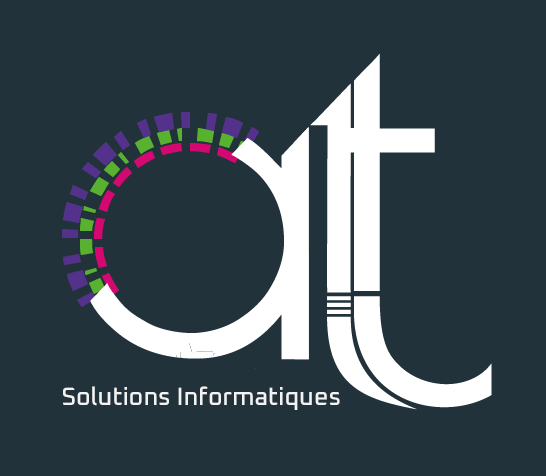
<style>
.page{position:relative;width:546px;height:476px;background:#21323b}
.page>*{position:absolute;margin:0}
.t1{font:25px "Oxanium-Medium";color:#f3f3f4}
</style>
<div class="page">
<p class="t1" style="left:63px;top:386px;width:277px;height:24px">Solutions Informatiques</p>
</div>
